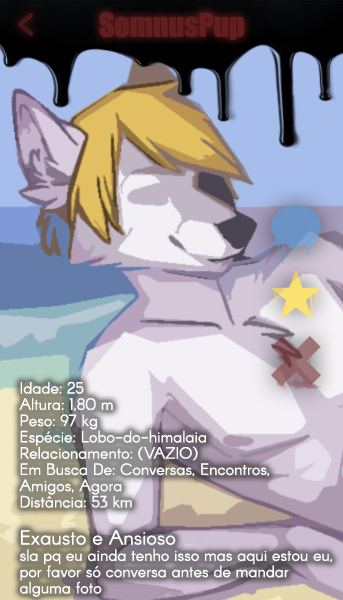
<style>
.page{position:relative;width:343px;height:600px}
.page>*{position:absolute;margin:0}
.t1{font:16px "Arcon-Regular";color:#ffffff}
.t2{font:20px "Arcon-Regular";color:#ffffff}
</style>
<div class="page">
<p class="t1" style="left:19px;top:381px;width:251px;height:127px">Idade: 25<br>Altura: 1,80 m<br>Peso: 97 kg<br>Espécie: Lobo-do-himalaia<br>Relacionamento: (VAZIO)<br>Em Busca De: Conversas, Encontros,<br>Amigos, Agora<br>Distância: 53 km</p>
<p class="t1" style="left:20px;top:530px;width:313px;height:67px"><span class="t2">Exausto e Ansioso<br></span>sla pq eu ainda tenho isso mas aqui estou eu,<br>por favor só conversa antes de mandar<br>alguma foto</p>
</div>
